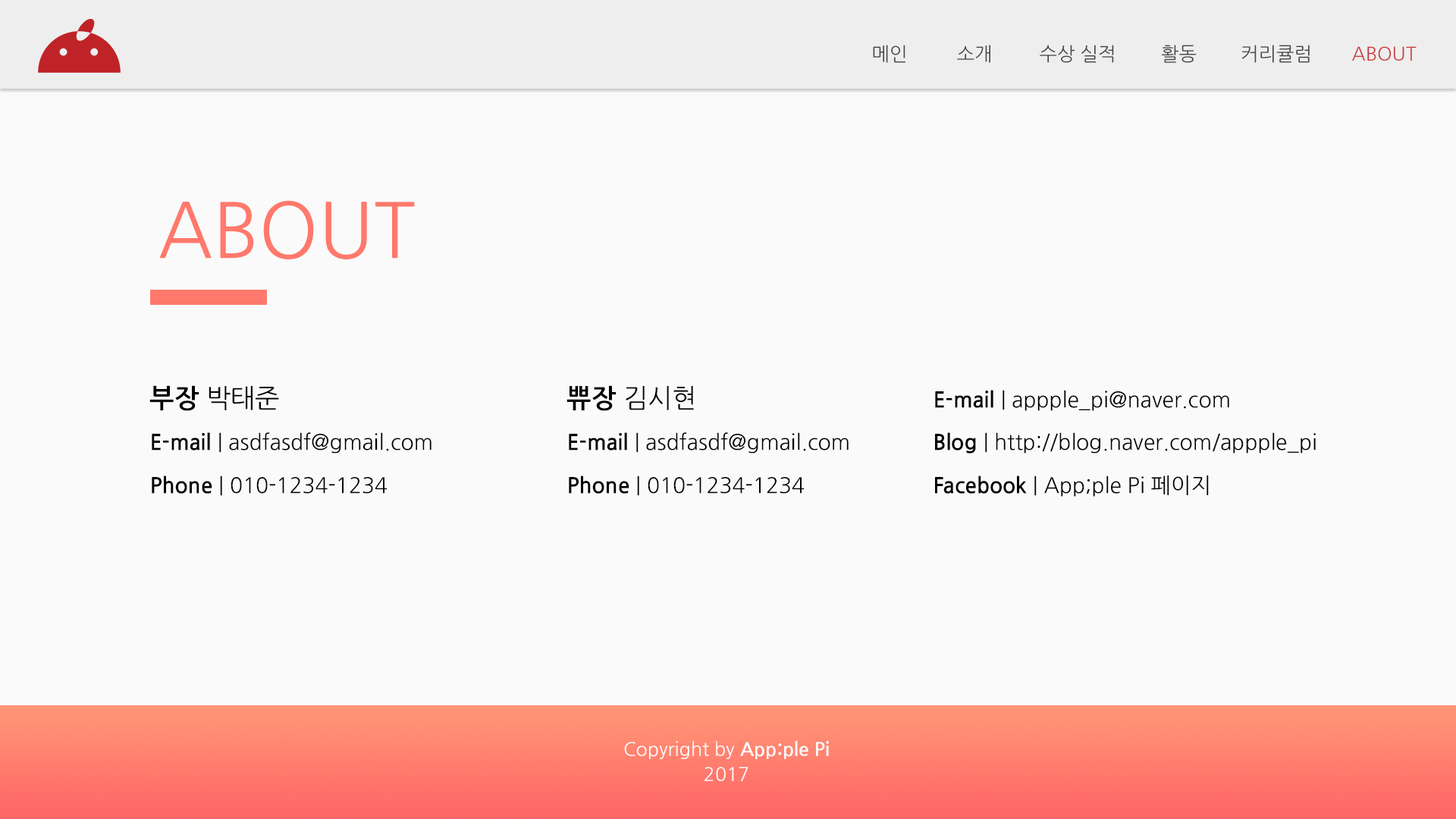
<style>
.page{position:relative;width:1456px;height:819px;background:#fafafa}
.page>*{position:absolute;margin:0}
.t1{font:19px "NanumGothic";color:#464646}
.t2{font:19px "NanumGothic";color:#cb3d3d}
.t3{font:75.8px "NanumGothic";color:#ff796c}
.t4{font:21.3px/42.7px "NanumGothic";color:#000000}
.t5{font:26.1px/42.7px "NanumGothicBold";color:#000000}
.t6{font:26.1px/42.7px "NanumGothic";color:#000000}
.t7{font:21.3px/42.7px "NanumGothicBold";color:#000000}
.t8{font:19px/25.3px "NanumGothic";color:#fafafa}
.t9{font:19px/25.3px "NanumGothicBold";color:#fafafa}
</style>
<div class="page">
<p class="t1" style="left:873px;top:45px;width:32px;height:18px">메인</p>
<p class="t1" style="left:957px;top:45px;width:33px;height:18px">소개</p>
<p class="t1" style="left:1040px;top:45px;width:74px;height:18px">수상 실적</p>
<p class="t1" style="left:1162px;top:45px;width:35px;height:18px">활동</p>
<p class="t1" style="left:1241px;top:45px;width:69px;height:18px">커리큘럼</p>
<p class="t2" style="left:1352px;top:46px;width:65px;height:15px">ABOUT</p>
<p class="t3" style="left:159px;top:200px;width:256px;height:59px">ABOUT</p>
<p class="t4" style="left:149px;top:385px;width:282px;height:111px"><span class="t5">부장</span><span class="t6"> 박태준<br></span><span class="t7">E-mail</span> | asdfasdf@gmail.com<br><span class="t7">Phone</span> | 010-1234-1234</p>
<p class="t4" style="left:566px;top:385px;width:283px;height:111px"><span class="t5">쀼장</span><span class="t6"> 김시현<br></span><span class="t7">E-mail</span> | asdfasdf@gmail.com<br><span class="t7">Phone</span> | 010-1234-1234</p>
<p class="t4" style="left:935px;top:390px;width:381px;height:107px"><span class="t7">E-mail</span> | appple_pi@naver.com<br><span class="t7">Blog</span> | http://blog.naver.com/appple_pi<br><span class="t7">Facebook</span> | App;ple Pi 페이지</p>
<p class="t8" style="left:624px;top:741px;width:205px;height:40px;text-align:center">Copyright by <span class="t9">App:ple Pi<br></span>2017</p>
</div>
